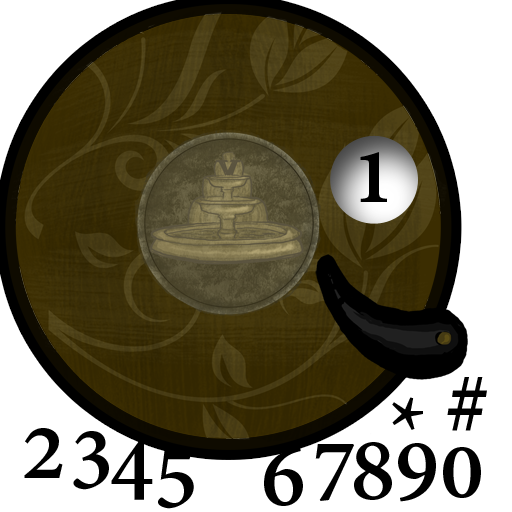
<style>
.page{position:relative;width:512px;height:512px;background:#ffffff}
.page>*{position:absolute;margin:0}
.t1{font:97.2px "AdobeGurmukhi-Bold";color:#000000}
</style>
<div class="page">
<p class="t1" style="left:360px;top:152px;width:27px;height:50px">1</p>
<p class="t1" style="left:447px;top:377px;width:40px;height:54px">#</p>
<p class="t1" style="left:392px;top:397px;width:31px;height:33px">*</p>
<p class="t1" style="left:24px;top:428px;width:39px;height:50px">2</p>
<p class="t1" style="left:73px;top:431px;width:36px;height:59px">3</p>
<p class="t1" style="left:111px;top:442px;width:42px;height:58px">4</p>
<p class="t1" style="left:264px;top:447px;width:39px;height:59px">6</p>
<p class="t1" style="left:315px;top:444px;width:39px;height:57px">7</p>
<p class="t1" style="left:354px;top:442px;width:38px;height:58px">8</p>
<p class="t1" style="left:398px;top:443px;width:38px;height:59px">9</p>
<p class="t1" style="left:443px;top:447px;width:38px;height:51px">0</p>
<p class="t1" style="left:158px;top:451px;width:36px;height:58px">5</p>
</div>
